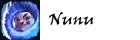
<style>
.page{position:relative;width:140px;height:40px;background:#ffffff}
.page>*{position:absolute;margin:0}
.t1{font:12px "VinerHandITC";color:#000000}
</style>
<div class="page">
<p class="t1" style="left:49px;top:12px;width:45px;height:13px">Nunu</p>
</div>
